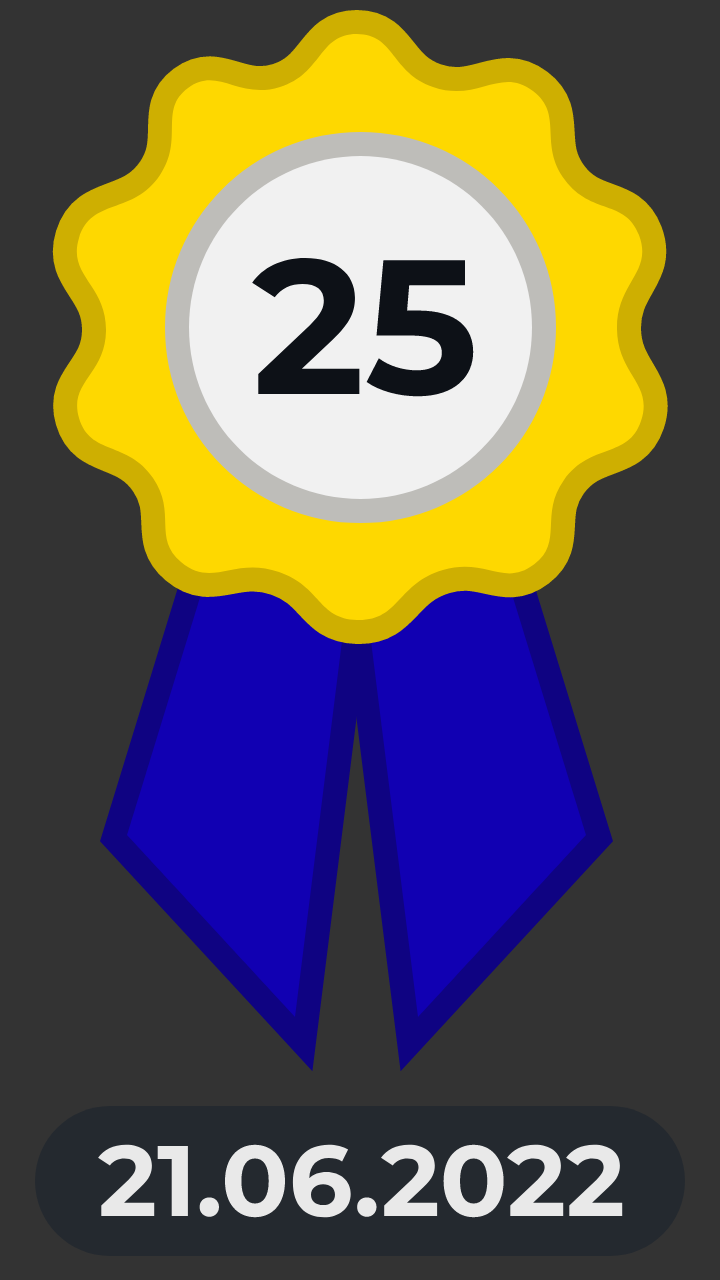
<style>
.page{position:relative;width:720px;height:1280px;background:#333333}
.page>*{position:absolute;margin:0}
.t1{font:191px "Montserrat-Bold";color:#0d1117}
.t2{font:100px "Montserrat-Bold";color:#e9e9e9}
</style>
<div class="page">
<p class="t1" style="left:252px;top:258px;width:222px;height:139px">25</p>
<p class="t2" style="left:98px;top:1144px;width:525px;height:74px">21.06.2022</p>
</div>
